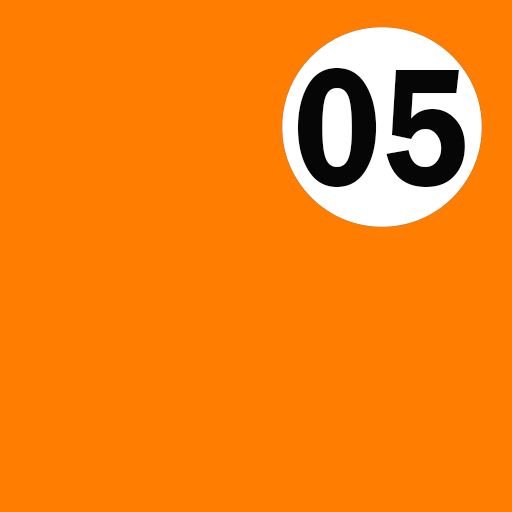
<style>
.page{position:relative;width:512px;height:512px;background:#ff7d00}
.page>*{position:absolute;margin:0}
.t1{font:172.5px "FranklinGothic-Demi";color:#060606;scale:0.87 1}
</style>
<div class="page">
<p class="t1" style="left:297px;top:68px;width:168px;height:119px">05</p>
</div>
